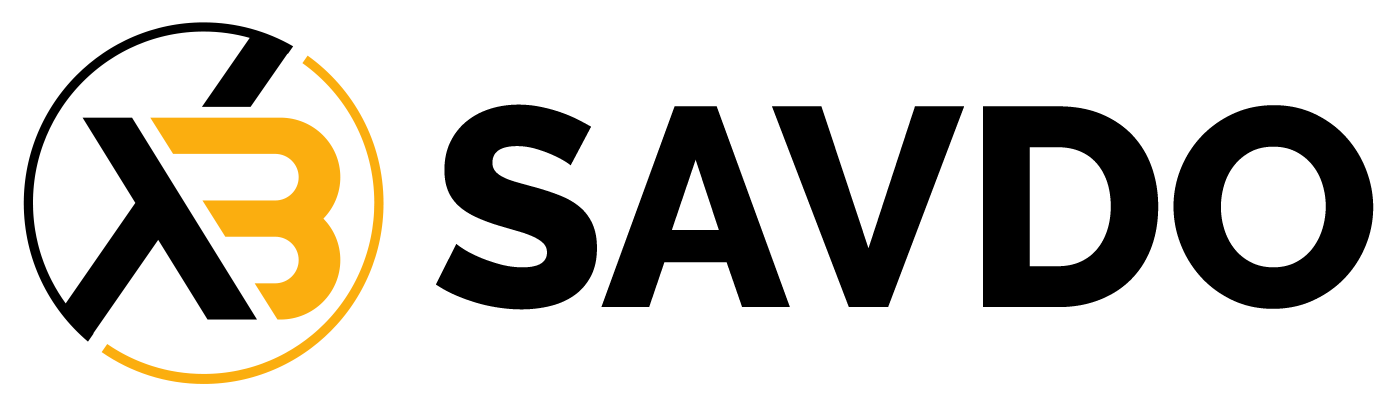
<style>
.page{position:relative;width:1400px;height:402px;background:#ffffff}
.page>*{position:absolute;margin:0}
.t1{font:282.4px "Raleway-ExtraBold";color:#000000}
</style>
<div class="page">
<p class="t1" style="left:436px;top:104px;width:938px;height:206px">SAVDO</p>
</div>
